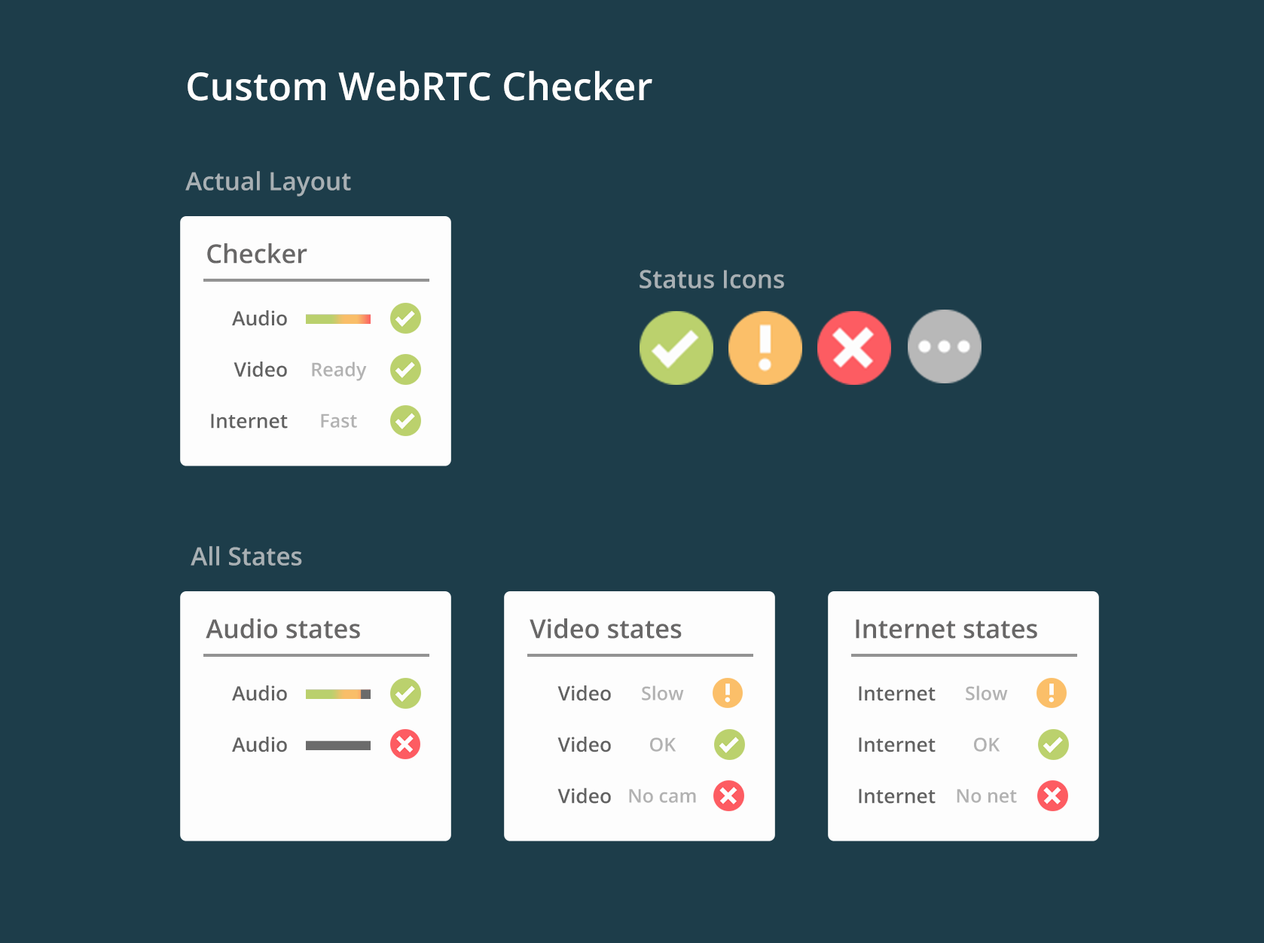
<style>
.page{position:relative;width:1264px;height:943px;background:#1d3d4a}
.page>*{position:absolute;margin:0}
.t1{font:38.5px "OpenSans-Semibold";color:#ffffff}
.t2{font:25.1px "OpenSans-Semibold";color:#a8b0b4}
.t3{font:25.9px "OpenSans-Semibold";color:#686767}
.t4{font:19.8px/51.3px "OpenSans-Semibold";color:#616161}
.t5{font:18.8px "OpenSans-Semibold";color:#b2b2b2}
</style>
<div class="page">
<p class="t1" style="left:188px;top:71px;width:464px;height:30px">Custom WebRTC Checker</p>
<p class="t2" style="left:185px;top:171px;width:166px;height:26px">Actual Layout</p>
<p class="t3" style="left:207px;top:243px;width:100px;height:21px">Checker</p>
<p class="t2" style="left:640px;top:270px;width:144px;height:19px">Status Icons</p>
<p class="t4" style="left:211px;top:310px;width:77px;height:119px;text-align:right">Audio<br>Video<br>Internet</p>
<p class="t5" style="left:312px;top:362px;width:55px;height:19px">Ready</p>
<p class="t5" style="left:321px;top:414px;width:36px;height:14px">Fast</p>
<p class="t2" style="left:191px;top:546px;width:111px;height:20px">All States</p>
<p class="t3" style="left:206px;top:619px;width:154px;height:20px">Audio states</p>
<p class="t3" style="left:530px;top:619px;width:152px;height:20px">Video states</p>
<p class="t3" style="left:856px;top:619px;width:181px;height:20px">Internet states</p>
<p class="t4" style="left:232px;top:686px;width:55px;height:67px;text-align:right">Audio<br>Audio<br>Internet</p>
<p class="t4" style="left:558px;top:686px;width:53px;height:118px;text-align:right">Video<br>Video<br>Video</p>
<p class="t5" style="left:642px;top:686px;width:42px;height:15px">Slow</p>
<p class="t4" style="left:859px;top:686px;width:77px;height:118px;text-align:right">Internet<br>Internet<br>Internet</p>
<p class="t5" style="left:966px;top:686px;width:42px;height:15px">Slow</p>
<p class="t5" style="left:650px;top:738px;width:27px;height:14px">OK</p>
<p class="t5" style="left:974px;top:738px;width:26px;height:14px">OK</p>
<p class="t5" style="left:629px;top:789px;width:67px;height:14px">No cam</p>
<p class="t5" style="left:957px;top:789px;width:60px;height:14px">No net</p>
</div>
